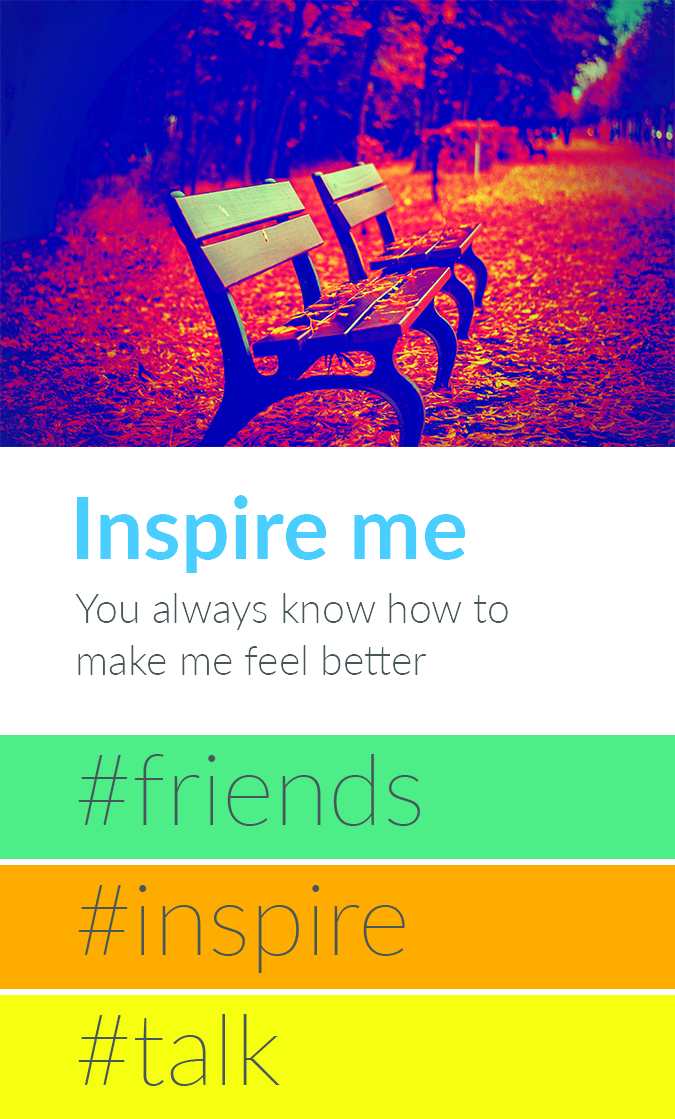
<style>
.page{position:relative;width:675px;height:1119px;background:#ffffff}
.page>*{position:absolute;margin:0}
.t1{font:86px "Lato-Bold";color:#4acdff}
.t2{font:41px/52px "Lato-Light";color:#48585a}
</style>
<div class="page">
<p class="t1" style="left:76px;top:495px;width:390px;height:78px">Inspire me</p>
<p class="t2" style="left:75px;top:593px;width:433px;height:82px;text-align:right">You always know how to make me feel better</p>
</div>
